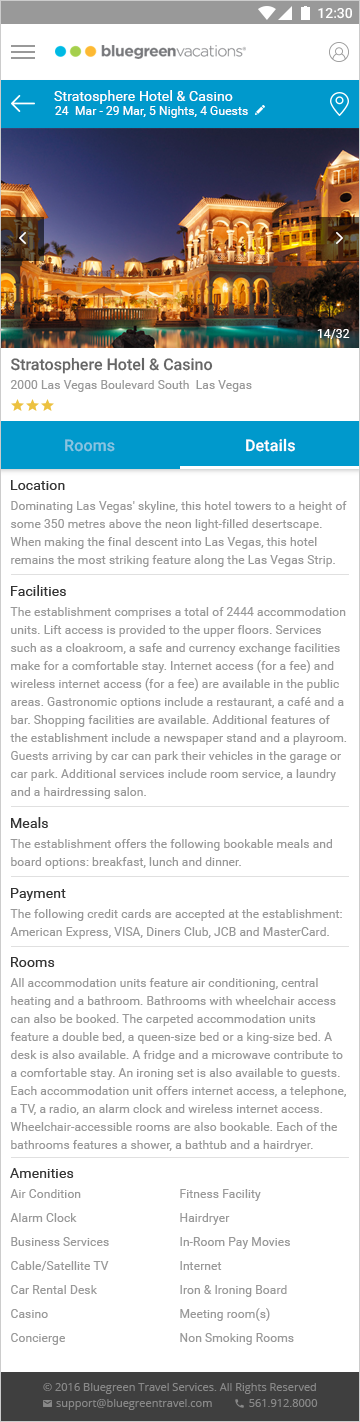
<style>
.page{position:relative;width:360px;height:1422px;background:#ffffff}
.page>*{position:absolute;margin:0}
.t1{font:14px "Roboto-Regular";letter-spacing:0.01em;color:#ffffff}
.t2{font:12px "Roboto-Regular";letter-spacing:0.01em;color:#ffffff}
.t3{font:16px "Roboto-Medium";color:#666666}
.t4{font:12px "Roboto-Regular";letter-spacing:0.01em;color:#999999}
.t5{font:16px "Roboto-Medium";letter-spacing:0.01em;color:#ffffff}
.t6{font:16px "Roboto-Medium";letter-spacing:0.01em;color:#88c4e0}
.t7{font:14px "Roboto-Regular";letter-spacing:0.01em;color:#333333}
.t8{font:12px/18px "Roboto-Regular";letter-spacing:0.01em;color:#999999}
.t9{font:12px/24px "Roboto-Regular";letter-spacing:0.01em;color:#999999}
</style>
<div class="page">
<p class="t1" style="left:54px;top:90px;width:179px;height:14px">Stratosphere Hotel &amp; Casino</p>
<p class="t2" style="left:55px;top:106px;width:193px;height:12px"><span class="t1"><br></span>24  Mar - 29 Mar, 5 Nights, 4 Guests</p>
<p class="t2" style="left:317px;top:329px;width:33px;height:10px">14/32</p>
<p class="t3" style="left:11px;top:357px;width:202px;height:17px">Stratosphere Hotel &amp; Casino</p>
<p class="t4" style="left:10px;top:380px;width:242px;height:12px">2000 Las Vegas Boulevard South  Las Vegas</p>
<p class="t5" style="left:246px;top:438px;width:49px;height:14px">Details</p>
<p class="t6" style="left:65px;top:439px;width:50px;height:13px">Rooms</p>
<p class="t7" style="left:11px;top:480px;width:54px;height:10px">Location</p>
<p class="t8" style="left:10px;top:501px;width:337px;height:66px">Dominating Las Vegas' skyline, this hotel towers to a height of some 350 metres above the neon light-filled desertscape. When making the final descent into Las Vegas, this hotel remains the most striking feature along the Las Vegas Strip.</p>
<p class="t7" style="left:11px;top:585px;width:55px;height:11px">Facilities</p>
<p class="t8" style="left:10px;top:607px;width:337px;height:192px">The establishment comprises a total of 2444 accommodation units. Lift access is provided to the upper floors. Services such as a cloakroom, a safe and currency exchange facilities make for a comfortable stay. Internet access (for a fee) and wireless internet access (for a fee) are available in the public areas. Gastronomic options include a restaurant, a café and a bar. Shopping facilities are available. Additional features of the establishment include a newspaper stand and a playroom. Guests arriving by car can park their vehicles in the garage or car park. Additional services include room service, a laundry and a hairdressing salon.</p>
<p class="t7" style="left:11px;top:817px;width:37px;height:11px">Meals</p>
<p class="t8" style="left:10px;top:839px;width:322px;height:30px">The establishment offers the following bookable meals and board options: breakfast, lunch and dinner.</p>
<p class="t7" style="left:11px;top:888px;width:55px;height:13px">Payment</p>
<p class="t8" style="left:10px;top:909px;width:332px;height:30px">The following credit cards are accepted at the establishment: American Express, VISA, Diners Club, JCB and MasterCard.</p>
<p class="t7" style="left:11px;top:957px;width:44px;height:10px">Rooms</p>
<p class="t8" style="left:10px;top:978px;width:336px;height:174px">All accommodation units feature air conditioning, central heating and a bathroom. Bathrooms with wheelchair access can also be booked. The carpeted accommodation units feature a double bed, a queen-size bed or a king-size bed. A desk is also available. A fridge and a microwave contribute to a comfortable stay. An ironing set is also available to guests. Each accommodation unit offers internet access, a telephone, a TV, a radio, an alarm clock and wireless internet access. Wheelchair-accessible rooms are also bookable. Each of the bathrooms features a shower, a bathtub and a hairdryer.</p>
<p class="t7" style="left:10px;top:1168px;width:64px;height:10px">Amenities</p>
<p class="t9" style="left:10px;top:1189px;width:99px;height:156px">Air Condition<br>Alarm Clock<br>Business Services<br>Cable/Satellite TV<br>Car Rental Desk<br>Casino<br>Concierge</p>
<p class="t9" style="left:180px;top:1189px;width:114px;height:156px">Fitness Facility<br>Hairdryer<br>In-Room Pay Movies<br>Internet<br>Iron &amp; Ironing Board<br>Meeting room(s)<br>Non Smoking Rooms</p>
</div>
